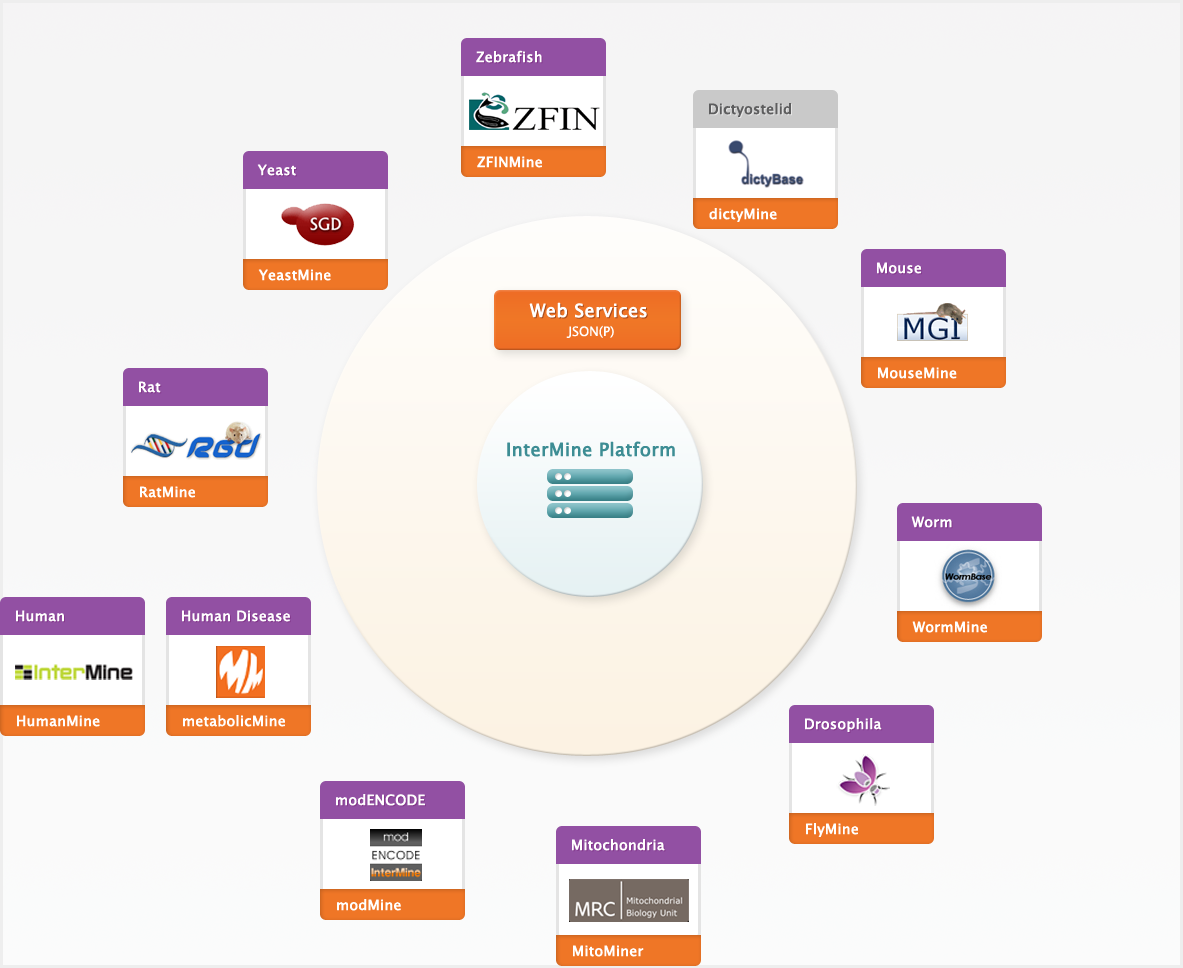
<style>
.page{position:relative;width:1183px;height:968px}
.page>*{position:absolute;margin:0}
.t1{font:14px "LucidaGrande";color:#ffffff;font-weight:bold}
.t2{font:14px "LucidaGrande";color:#5d5d5e;font-weight:bold}
.t3{font:18px "LucidaGrande";color:#ffffff;font-weight:bold}
.t4{font:18px "LucidaGrande";font-weight:bold}
.t5{font:13px "LucidaGrande";color:#ffffff}
.t6{font:14px "LucidaGrande";font-weight:bold}
.t7{font:18px "LucidaGrande";color:#3d8d94;font-weight:bold}
</style>
<div class="page">
<p class="t1" style="left:476px;top:50px;width:66px;height:13px">Zebrafish</p>
<p class="t2" style="left:709px;top:103px;width:82px;height:14px">Dictyostelid</p>
<p class="t1" style="left:477px;top:156px;width:65px;height:12px">ZFINMine</p>
<p class="t1" style="left:257px;top:164px;width:39px;height:12px">Yeast</p>
<p class="t1" style="left:709px;top:208px;width:68px;height:14px">dictyMine</p>
<p class="t1" style="left:258px;top:269px;width:73px;height:12px">YeastMine</p>
<p class="t1" style="left:877px;top:262px;width:45px;height:12px">Mouse</p>
<p class="t3" style="left:529px;top:302px;width:118px;height:16px">Web Services</p>
<p class="t4" style="left:530px;top:303px;width:118px;height:16px">Web Services</p>
<p class="t5" style="left:566px;top:325px;width:48px;height:13px">JSON(P)</p>
<p class="t1" style="left:878px;top:367px;width:79px;height:12px">MouseMine</p>
<p class="t1" style="left:139px;top:381px;width:22px;height:12px">Rat</p>
<p class="t6" style="left:140px;top:382px;width:22px;height:12px">Rat</p>
<p class="t7" style="left:507px;top:441px;width:168px;height:16px">InterMine Platform</p>
<p class="t1" style="left:140px;top:486px;width:55px;height:12px">RatMine</p>
<p class="t1" style="left:911px;top:516px;width:41px;height:12px">Worm</p>
<p class="t1" style="left:16px;top:610px;width:48px;height:12px">Human</p>
<p class="t1" style="left:182px;top:610px;width:108px;height:12px">Human Disease</p>
<p class="t1" style="left:912px;top:621px;width:75px;height:12px">WormMine</p>
<p class="t1" style="left:17px;top:715px;width:83px;height:12px">HumanMine</p>
<p class="t1" style="left:183px;top:715px;width:102px;height:12px">metabolicMine</p>
<p class="t1" style="left:805px;top:718px;width:77px;height:14px">Drosophila</p>
<p class="t1" style="left:336px;top:794px;width:89px;height:12px">modENCODE</p>
<p class="t1" style="left:806px;top:823px;width:52px;height:14px">FlyMine</p>
<p class="t1" style="left:572px;top:839px;width:93px;height:12px">Mitochondria</p>
<p class="t1" style="left:337px;top:899px;width:64px;height:12px">modMine</p>
<p class="t1" style="left:573px;top:945px;width:71px;height:12px">MitoMiner</p>
</div>
